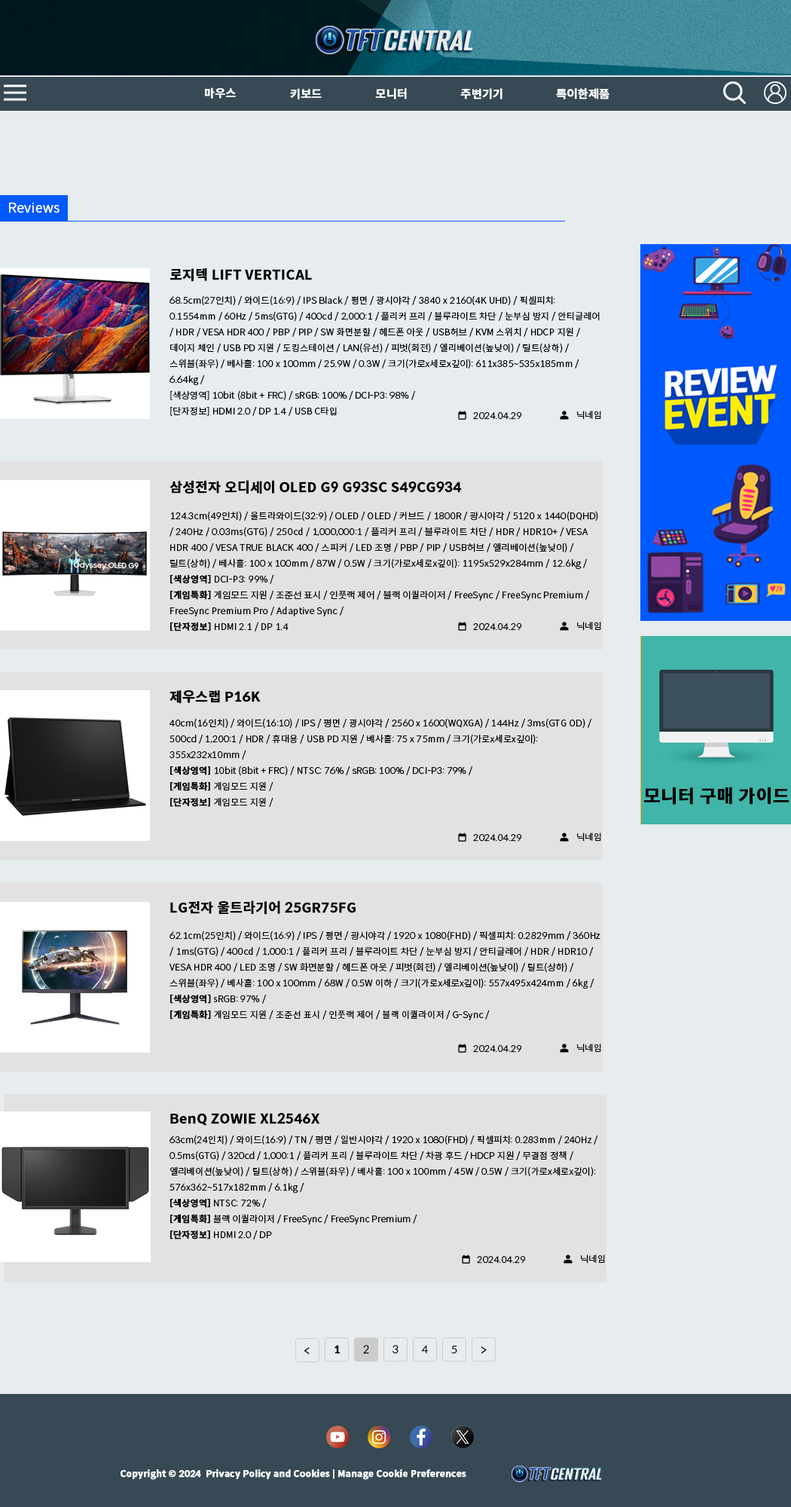
<style>
.page{position:relative;width:791px;height:1507px;background:#e7ecef}
.page>*{position:absolute;margin:0}
.t1{font:11.3px "SpoqaHanSansNeo-Bold";color:#ffffff;font-weight:bold}
.t2{font:13.6px "SpoqaHanSansNeo-Light";color:#ffffff;font-weight:bold}
.t3{font:13.6px "SpoqaHanSansNeo-Bold";color:#000000;font-weight:bold}
.t4{font:9px "SpoqaHanSansNeo-Light";color:#000000;font-weight:bold}
.t5{font:9px "SpoqaHanSansNeo-Bold";color:#000000;font-weight:bold}
.t6{font:12.1px "SpoqaHanSansNeo-Light";color:#000000;font-weight:bold}
.t7{font:10.5px "SpoqaHanSansNeo-Bold";color:#000000;font-weight:bold}
.t8{font:10.5px "SpoqaHanSansNeo-Light";color:#000000;font-weight:bold}
.t9{font:9px "SpoqaHanSansNeo-Bold";color:#ffffff;font-weight:bold}
</style>
<div class="page">
<p class="t1" style="left:205px;top:87px;width:31px;height:12px">마우스</p>
<p class="t1" style="left:290px;top:88px;width:32px;height:11px">키보드</p>
<p class="t1" style="left:375px;top:88px;width:32px;height:11px">모니터</p>
<p class="t1" style="left:460px;top:88px;width:43px;height:11px">주변기기</p>
<p class="t1" style="left:556px;top:88px;width:54px;height:11px">특이한제품</p>
<p class="t2" style="left:9px;top:202px;width:51px;height:11px">Reviews</p>
<p class="t3" style="left:170px;top:268px;width:142px;height:14px">로지텍 LIFT VERTICAL</p>
<p class="t4" style="left:170px;top:295px;width:430px;height:121px">68.5cm(27인치) / 와이드(16:9) / IPS Black / 평면 / 광시야각 / 3840 x 2160(4K UHD) / 픽셀피치: 0.1554mm / 60Hz / 5ms(GTG) / 400cd / 2,000:1 / 플리커 프리 / 블루라이트 차단 / 눈부심 방지 / 안티글레어 / HDR / VESA HDR 400 / PBP / PIP / SW 화면분할 / 헤드폰 아웃 / USB허브 / KVM 스위치 / HDCP 지원 / 데이지 체인 / USB PD 지원 / 도킹스테이션 / LAN(유선) / 피벗(회전) / 엘리베이션(높낮이) / 틸트(상하) / 스위블(좌우) / 베사홀: 100 x 100mm / 25.9W / 0.3W / 크기(가로x세로x깊이): 611x385~535x185mm / 6.64kg /<br>[색상영역] 10bit (8bit + FRC) / sRGB: 100% / DCI-P3: 98% /<br>[단자정보] HDMI 2.0 / DP 1.4 / USB C타입</p>
<p class="t4" style="left:473px;top:412px;width:49px;height:8px">2024.04.29</p>
<p class="t4" style="left:577px;top:411px;width:24px;height:9px">닉네임</p>
<p class="t3" style="left:170px;top:480px;width:292px;height:14px">삼성전자 오디세이 OLED G9 G93SC S49CG934</p>
<p class="t4" style="left:170px;top:511px;width:428px;height:120px">124.3cm(49인치) / 울트라와이드(32:9) / OLED / OLED / 커브드 / 1800R / 광시야각 / 5120 x 1440(DQHD) / 240Hz / 0.03ms(GTG) / 250cd / 1,000,000:1 / 플리커 프리 / 블루라이트 차단 / HDR / HDR10+ / VESA HDR 400 / VESA TRUE BLACK 400 / 스피커 / LED 조명 / PBP / PIP / USB허브 / 엘리베이션(높낮이) / 틸트(상하) / 베사홀: 100 x 100mm / 87W / 0.5W / 크기(가로x세로x깊이): 1195x529x284mm / 12.6kg /<br><span class="t5">[색상영역]</span> DCI-P3: 99% /<br><span class="t5">[게임특화]</span> 게임모드 지원 / 조준선 표시 / 인풋랙 제어 / 블랙 이퀄라이저 / FreeSync / FreeSync Premium / FreeSync Premium Pro / Adaptive Sync /<br><span class="t5">[단자정보]</span> HDMI 2.1 / DP 1.4</p>
<p class="t4" style="left:473px;top:623px;width:49px;height:8px">2024.04.29</p>
<p class="t4" style="left:577px;top:622px;width:24px;height:9px">닉네임</p>
<p class="t3" style="left:170px;top:690px;width:91px;height:14px">제우스랩 P16K</p>
<p class="t4" style="left:170px;top:718px;width:422px;height:89px">40cm(16인치) / 와이드(16:10) / IPS / 평면 / 광시야각 / 2560 x 1600(WQXGA) / 144Hz / 3ms(GTG OD) / 500cd / 1,200:1 / HDR / 휴대용 / USB PD 지원 / 베사홀: 75 x 75mm / 크기(가로x세로x깊이): 355x232x10mm /<br><span class="t5">[색상영역]</span> 10bit (8bit + FRC) / NTSC: 76% / sRGB: 100% / DCI-P3: 79% /<br><span class="t5">[게임특화]</span> 게임모드 지원 /<br><span class="t5">[단자정보] </span>게임모드 지원 /</p>
<p class="t4" style="left:577px;top:833px;width:24px;height:9px">닉네임</p>
<p class="t4" style="left:473px;top:834px;width:49px;height:8px">2024.04.29</p>
<p class="t3" style="left:170px;top:900px;width:186px;height:15px">LG전자 울트라기어 25GR75FG</p>
<p class="t4" style="left:170px;top:931px;width:431px;height:90px">62.1cm(25인치) / 와이드(16:9) / IPS / 평면 / 광시야각 / 1920 x 1080(FHD) / 픽셀피치: 0.2829mm / 360Hz / 1ms(GTG) / 400cd / 1,000:1 / 플리커 프리 / 블루라이트 차단 / 눈부심 방지 / 안티글레어 / HDR / HDR10 / VESA HDR 400 / LED 조명 / SW 화면분할 / 헤드폰 아웃 / 피벗(회전) / 엘리베이션(높낮이) / 틸트(상하) / 스위블(좌우) / 베사홀: 100 x 100mm / 68W / 0.5W 이하 / 크기(가로x세로x깊이): 557x495x424mm / 6kg /<br><span class="t5">[색상영역]</span> sRGB: 97% /<br><span class="t5">[게임특화]</span> 게임모드 지원 / 조준선 표시 / 인풋랙 제어 / 블랙 이퀄라이저 / G-Sync /<br><br>[단자정보] HDMI 2.0 / DP 1.4</p>
<p class="t4" style="left:473px;top:1045px;width:49px;height:8px">2024.04.29</p>
<p class="t4" style="left:577px;top:1044px;width:24px;height:9px">닉네임</p>
<p class="t3" style="left:170px;top:1113px;width:150px;height:13px">BenQ ZOWIE XL2546X</p>
<p class="t4" style="left:170px;top:1135px;width:428px;height:105px">63cm(24인치) / 와이드(16:9) / TN / 평면 / 일반시야각 / 1920 x 1080(FHD) / 픽셀피치: 0.283mm / 240Hz / 0.5ms(GTG) / 320cd / 1,000:1 / 플리커 프리 / 블루라이트 차단 / 차광 후드 / HDCP 지원 / 무결점 정책 / 엘리베이션(높낮이) / 틸트(상하) / 스위블(좌우) / 베사홀: 100 x 100mm / 45W / 0.5W / 크기(가로x세로x깊이): 576x362~517x182mm / 6.1kg /<br><span class="t5">[색상영역]</span> NTSC: 72% /<br><span class="t5">[게임특화] </span>블랙 이퀄라이저 / FreeSync / FreeSync Premium /<br><span class="t5">[단자정보]</span> HDMI 2.0 / DP</p>
<p class="t4" style="left:477px;top:1256px;width:49px;height:8px">2024.04.29</p>
<p class="t4" style="left:581px;top:1255px;width:24px;height:9px">닉네임</p>
<p class="t6" style="left:304px;top:1347px;width:6px;height:8px">&lt;</p>
<p class="t7" style="left:335px;top:1345px;width:6px;height:9px">1</p>
<p class="t8" style="left:363px;top:1345px;width:6px;height:9px">2</p>
<p class="t8" style="left:393px;top:1345px;width:6px;height:9px">3</p>
<p class="t8" style="left:422px;top:1345px;width:7px;height:9px">4</p>
<p class="t8" style="left:451px;top:1346px;width:6px;height:8px">5</p>
<p class="t6" style="left:482px;top:1347px;width:5px;height:7px">&gt;</p>
<p class="t9" style="left:121px;top:1469px;width:345px;height:11px">Copyright © 2024  Privacy Policy and Cookies | Manage Cookie Preferences</p>
</div>
